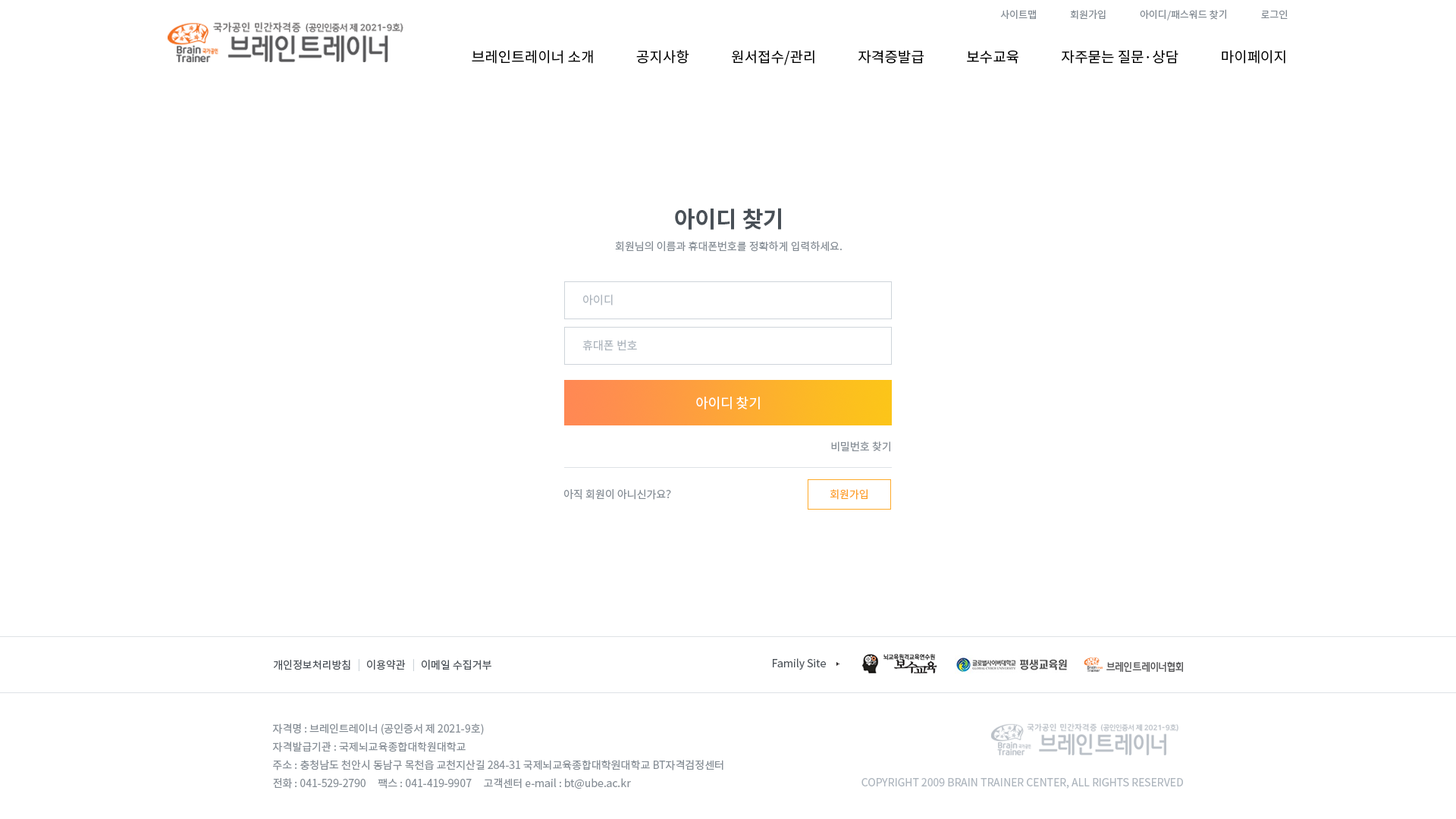
<style>
.page{position:relative;width:1456px;height:819px;background:#ffffff}
.page>*{position:absolute;margin:0}
.t1{font:9.9px "NotoSansCJKkr-Regular";letter-spacing:0.001em;color:#868e96}
.t2{font:14.4px "NotoSansCJKkr-Regular";color:#000000}
.t3{font:22.7px "NotoSansCJKkr-Bold";color:#495057}
.t4{font:10.6px "NotoSansCJKkr-Regular";color:#868e96;text-transform:uppercase}
.t5{font:11.4px "NotoSansCJKkr-Regular";color:#adb5bd}
.t6{font:13.6px "NotoSansCJKkr-Regular";color:#ffffff}
.t7{font:10.6px "NotoSansCJKkr-Regular";color:#868e96}
.t8{font:10.6px "NotoSansCJKkr-Regular";color:#fd9f27}
.t9{font:10.6px "NotoSansCJKkr-Regular";color:#495057}
.t10{font:10.6px "NotoSansCJKkr-Regular";color:#ced4da}
.t11{font:10.6px/18.2px "NotoSansCJKkr-Regular";color:#868e96}
.t12{font:10.6px "NotoSansCJKkr-Regular";color:#adb5bd}
</style>
<div class="page">
<p class="t1" style="left:1000px;top:9px;width:288px;height:11px">사이트맵               회원가입               아이디/패스워드 찾기               로그인</p>
<p class="t2" style="left:472px;top:49px;width:813px;height:16px">브레인트레이너 소개             공지사항             원서접수/관리             자격증발급             보수교육             자주묻는 질문·상담             마이페이지</p>
<p class="t3" style="left:675px;top:208px;width:106px;height:22px">아이디 찾기</p>
<p class="t4" style="left:615px;top:241px;width:227px;height:11px">회원님의 이름과 휴대폰번호를 정확하게 입력하세요.</p>
<p class="t5" style="left:583px;top:294px;width:30px;height:12px">아이디</p>
<p class="t5" style="left:582px;top:340px;width:55px;height:11px">휴대폰 번호</p>
<p class="t6" style="left:696px;top:397px;width:64px;height:12px">아이디 찾기</p>
<p class="t7" style="left:831px;top:441px;width:59px;height:11px">비밀번호 찾기</p>
<p class="t7" style="left:564px;top:489px;width:107px;height:11px">아직 회원이 아니신가요?</p>
<p class="t8" style="left:830px;top:489px;width:38px;height:11px">회원가입</p>
<p class="t9" style="left:273px;top:660px;width:77px;height:10px">개인정보처리방침</p>
<p class="t10" style="left:358px;top:659px;width:1px;height:12px">|</p>
<p class="t9" style="left:367px;top:660px;width:39px;height:10px">이용약관</p>
<p class="t10" style="left:413px;top:659px;width:1px;height:12px">|</p>
<p class="t9" style="left:422px;top:660px;width:69px;height:10px">이메일 수집거부</p>
<p class="t9" style="left:773px;top:658px;width:53px;height:12px">Family Site</p>
<p class="t11" style="left:272px;top:723px;width:451px;height:66px">자격명 : 브레인트레이너 (공인증서 제 2021-9호)<br>자격발급기관 : 국제뇌교육종합대학원대학교<br>주소 : 충청남도 천안시 동남구 목천읍 교천지산길 284-31 국제뇌교육종합대학원대학교 BT자격검정센터<br>전화 : 041-529-2790     팩스 : 041-419-9907     고객센터 e-mail : bt@ube.ac.kr</p>
<p class="t12" style="left:861px;top:778px;width:322px;height:11px">COPYRIGHT 2009 BRAIN TRAINER CENTER, ALL RIGHTS RESERVED</p>
</div>
